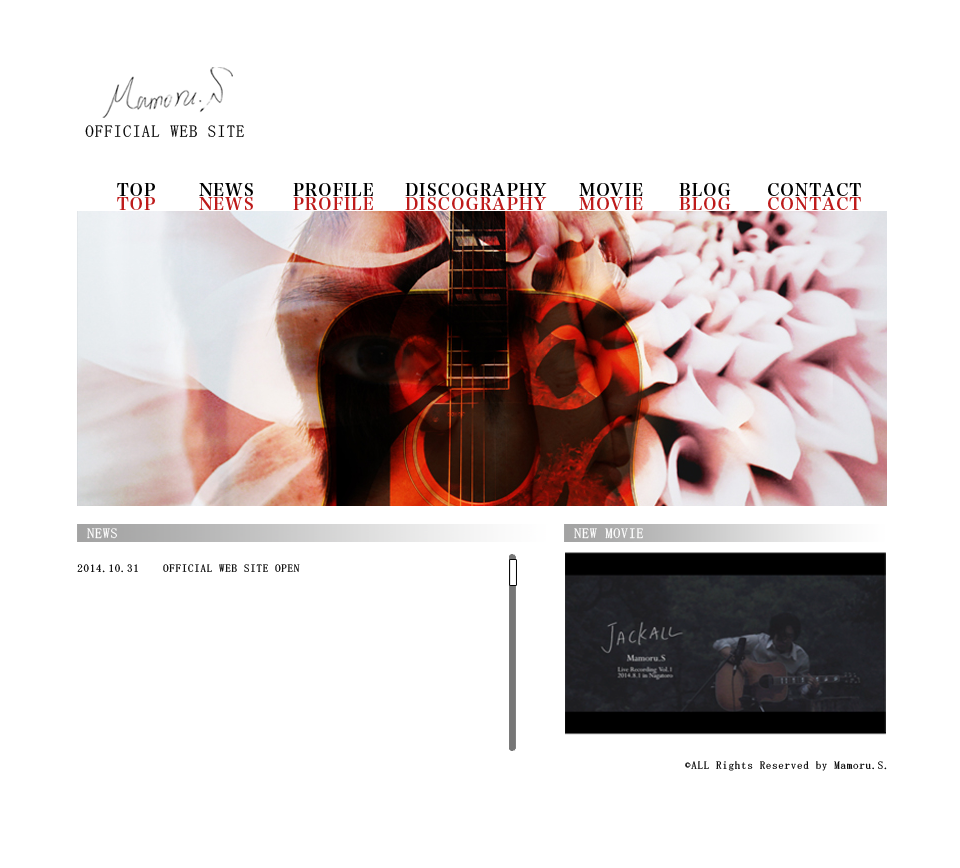
<style>
.page{position:relative;width:960px;height:868px;background:#ffffff}
.page>*{position:absolute;margin:0}
.t1{font:16.8px "MS-Mincho";letter-spacing:0.06em;color:#000000}
.t2{font:16.7px "HiraMinProN-W6";letter-spacing:0.06em;color:#000000}
.t3{font:16.7px "HiraMinProN-W6";letter-spacing:0.06em;color:#be1b1b}
.t4{font:13.9px "MS-Mincho";letter-spacing:0.06em;color:#ffffff}
.t5{font:11.1px "MS-Mincho";letter-spacing:0.06em;color:#000000}
</style>
<div class="page">
<p class="t1" style="left:85px;top:125px;width:159px;height:12px">OFFICIAL WEB SITE</p>
<p class="t2" style="left:117px;top:183px;width:38px;height:13px">TOP</p>
<p class="t2" style="left:199px;top:183px;width:54px;height:13px">NEWS</p>
<p class="t2" style="left:293px;top:183px;width:80px;height:13px">PROFILE</p>
<p class="t2" style="left:405px;top:183px;width:142px;height:13px">DISCOGRAPHY</p>
<p class="t2" style="left:579px;top:183px;width:64px;height:13px">MOVIE</p>
<p class="t2" style="left:679px;top:183px;width:52px;height:13px">BLOG</p>
<p class="t2" style="left:768px;top:183px;width:93px;height:13px">CONTACT</p>
<p class="t3" style="left:117px;top:197px;width:38px;height:13px">TOP</p>
<p class="t3" style="left:199px;top:197px;width:54px;height:13px">NEWS</p>
<p class="t3" style="left:293px;top:197px;width:80px;height:13px">PROFILE</p>
<p class="t3" style="left:405px;top:197px;width:142px;height:13px">DISCOGRAPHY</p>
<p class="t3" style="left:579px;top:197px;width:64px;height:13px">MOVIE</p>
<p class="t3" style="left:679px;top:197px;width:52px;height:13px">BLOG</p>
<p class="t3" style="left:768px;top:197px;width:93px;height:13px">CONTACT</p>
<p class="t4" style="left:87px;top:528px;width:30px;height:11px">NEWS</p>
<p class="t4" style="left:574px;top:528px;width:70px;height:11px">NEW MOVIE</p>
<p class="t5" style="left:77px;top:564px;width:223px;height:9px">2014.10.31　　OFFICIAL WEB SITE OPEN</p>
<p class="t5" style="left:685px;top:761px;width:202px;height:10px">©ALL Rights Reserved by Mamoru.S.</p>
</div>
